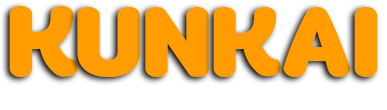
<style>
.page{position:relative;width:387px;height:110px;background:#ff9c00}
.page>*{position:absolute;margin:0}
.t1{font:137.9px "FCHomeBlack";color:#ff9c00}
.t2{font:136.1px "FCHomeBlack";color:#ff9c00}
</style>
<div class="page">
<p class="t1" style="left:9px;top:6px;width:69px;height:71px">K</p>
<p class="t2" style="left:77px;top:7px;width:63px;height:70px">U</p>
<p class="t2" style="left:145px;top:7px;width:64px;height:70px">N</p>
<p class="t2" style="left:213px;top:7px;width:68px;height:70px">K</p>
<p class="t2" style="left:283px;top:7px;width:68px;height:70px">A</p>
<p class="t2" style="left:354px;top:7px;width:23px;height:70px">I</p>
</div>
